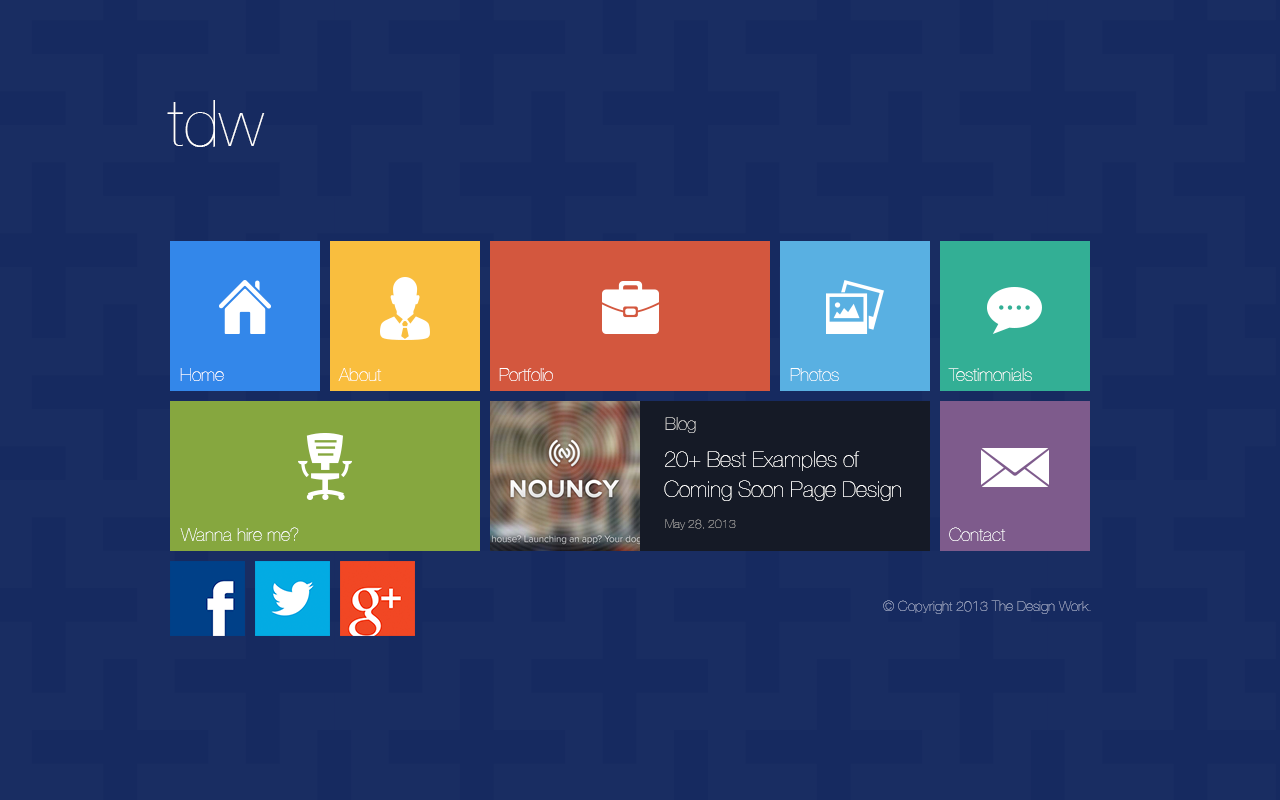
<style>
.page{position:relative;width:1280px;height:800px;background:#192d62}
.page>*{position:absolute;margin:0}
.t1{font:65px "HelveticaNeue-UltraLight";color:#ffffff}
.t2{font:18px "HelveticaNeue-UltraLight";color:#ffffff}
.t3{font:18px "HelveticaNeue-UltraLight";color:#cccccc}
.t4{font:22px/30px "HelveticaNeue-UltraLight";color:#ffffff}
.t5{font:12px "HelveticaNeue-UltraLight";color:#999999}
.t6{font:14px "HelveticaNeue-UltraLight";color:#99a4c1}
</style>
<div class="page">
<p class="t1" style="left:167px;top:100px;width:98px;height:47px">tdw</p>
<p class="t2" style="left:180px;top:368px;width:44px;height:13px">Home</p>
<p class="t2" style="left:338px;top:368px;width:44px;height:13px">About</p>
<p class="t2" style="left:499px;top:368px;width:54px;height:13px">Portfolio</p>
<p class="t2" style="left:790px;top:368px;width:49px;height:13px">Photos</p>
<p class="t2" style="left:948px;top:368px;width:84px;height:13px">Testimonials</p>
<p class="t3" style="left:665px;top:417px;width:31px;height:16px">Blog</p>
<p class="t4" style="left:664px;top:451px;width:237px;height:50px">20+ Best Examples of <br>Coming Soon Page Design</p>
<p class="t5" style="left:665px;top:519px;width:71px;height:11px">May 28, 2013</p>
<p class="t2" style="left:180px;top:527px;width:119px;height:14px">Wanna hire me?</p>
<p class="t2" style="left:949px;top:527px;width:57px;height:14px">Contact</p>
<p class="t6" style="left:883px;top:600px;width:208px;height:14px">© Copyright 2013 The Design Work.</p>
</div>
